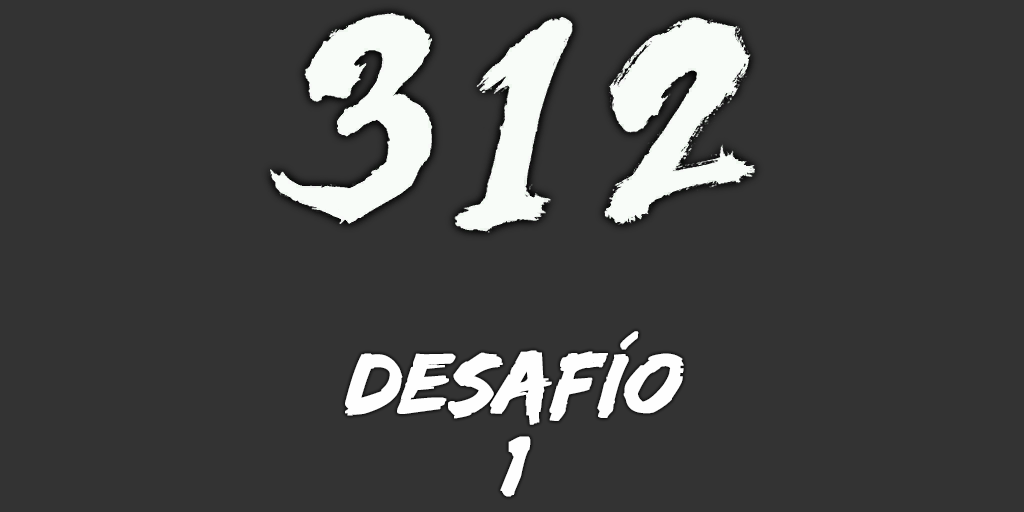
<style>
.page{position:relative;width:1024px;height:512px;background:#333333}
.page>*{position:absolute;margin:0}
.t1{font:88px "EdoSZ";color:#fefefe;font-weight:bold;font-style:italic;scale:1.04 1}
</style>
<div class="page">
<p class="t1" style="left:345px;top:331px;width:339px;height:94px">desafío</p>
<p class="t1" style="left:500px;top:436px;width:31px;height:61px">1</p>
</div>
